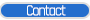
<style>
.page{position:relative;width:90px;height:20px;background:#246ecd}
.page>*{position:absolute;margin:0}
.t1{font:16px "Asleepytiming";color:#ffffff}
</style>
<div class="page">
<p class="t1" style="left:27px;top:5px;width:39px;height:11px">Contact</p>
</div>
